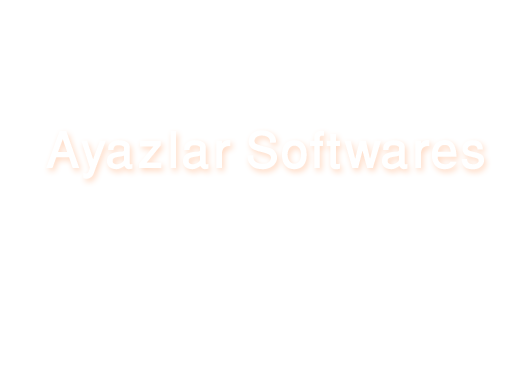
<style>
.page{position:relative;width:512px;height:384px;background:#ffffff}
.page>*{position:absolute;margin:0}
.t1{font:72px "WinSoftPro-Medium";color:#ffffff}
</style>
<div class="page">
<p class="t1" style="left:46px;top:130px;width:438px;height:49px">Ayazlar Softwares</p>
</div>
